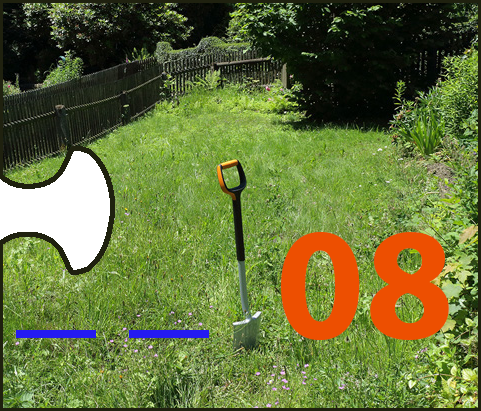
<style>
.page{position:relative;width:481px;height:411px}
.page>*{position:absolute;margin:0}
.t1{font:160px "MyriadPro-Bold";color:#ed4f01}
.t2{font:160px "MyriadPro-Bold";color:#241af1}
</style>
<div class="page">
<p class="t1" style="left:281px;top:231px;width:168px;height:110px">08</p>
<p class="t2" style="left:16px;top:330px;width:193px;height:8px">_ _</p>
</div>
